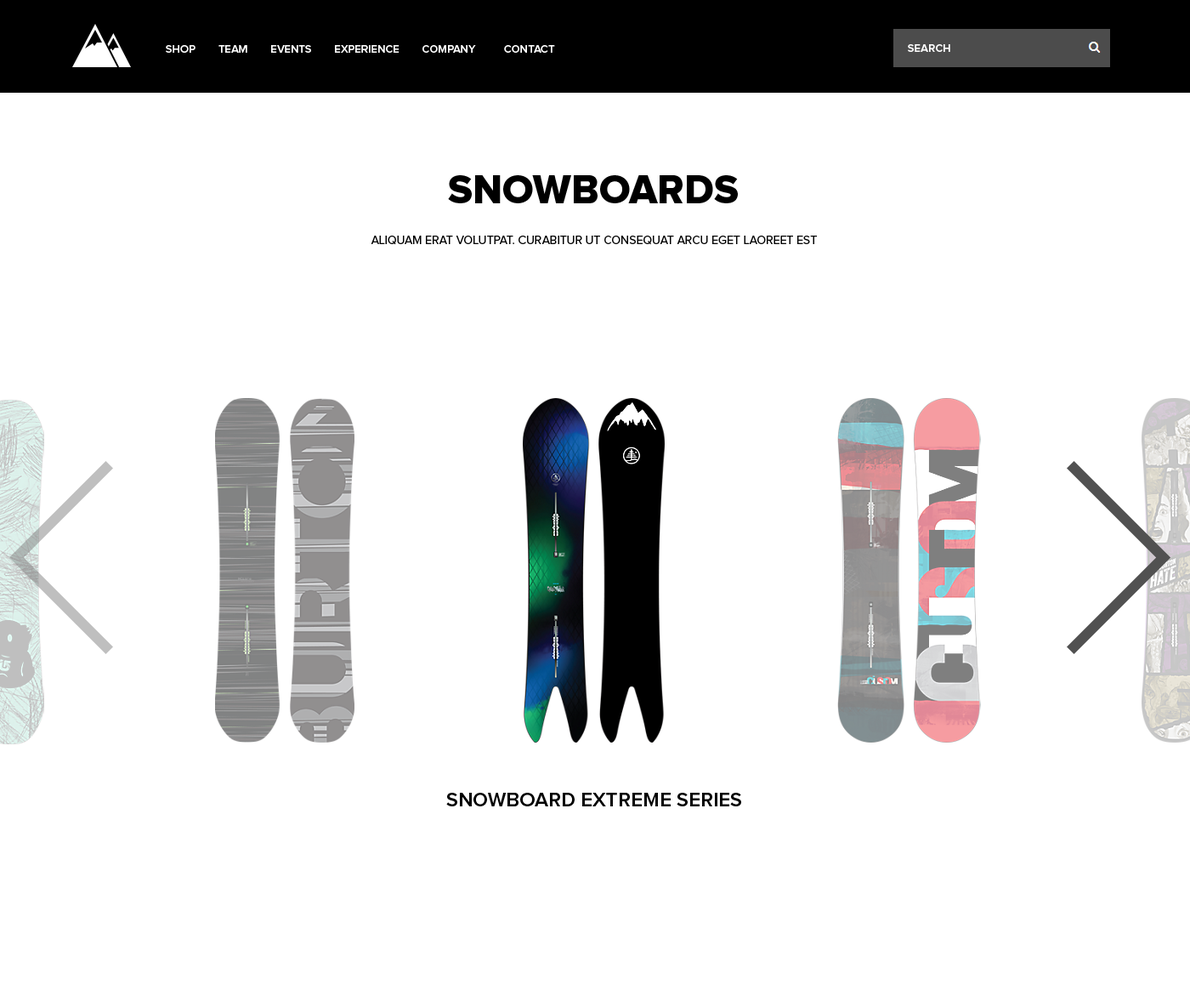
<style>
.page{position:relative;width:1190px;height:1002px;background:#ffffff}
.page>*{position:absolute;margin:0}
.t1{font:11.1px "ProximaNova-Semibold";color:#ffffff;text-transform:uppercase}
.t2{font:40.8px "ProximaNova-Extrabld";color:#000000;text-transform:uppercase}
.t3{font:11.9px "ProximaNova-Regular";color:#000000;text-transform:uppercase}
.t4{font:20.4px "ProximaNova-Semibold";color:#000000;text-transform:uppercase}
</style>
<div class="page">
<p class="t1" style="left:166px;top:45px;width:389px;height:8px">SHOP        TEAM        EVENTS        EXPERIENCE        COMPANY          Contact</p>
<p class="t1" style="left:908px;top:44px;width:43px;height:8px">search</p>
<p class="t2" style="left:448px;top:175px;width:290px;height:28px">snowboards</p>
<p class="t3" style="left:371px;top:236px;width:446px;height:9px">Aliquam erat volutpat. Curabitur ut consequat arcu eget laoreet est</p>
<p class="t4" style="left:446px;top:792px;width:295px;height:14px">Snowboard extreme Series</p>
</div>
